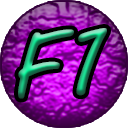
<style>
.page{position:relative;width:128px;height:128px}
.page>*{position:absolute;margin:0}
.t1{font:94px "MVBoli";letter-spacing:0.075em}
</style>
<div class="page">
<p class="t1" style="left:18px;top:28px;width:89px;height:71px">F1</p>
</div>
